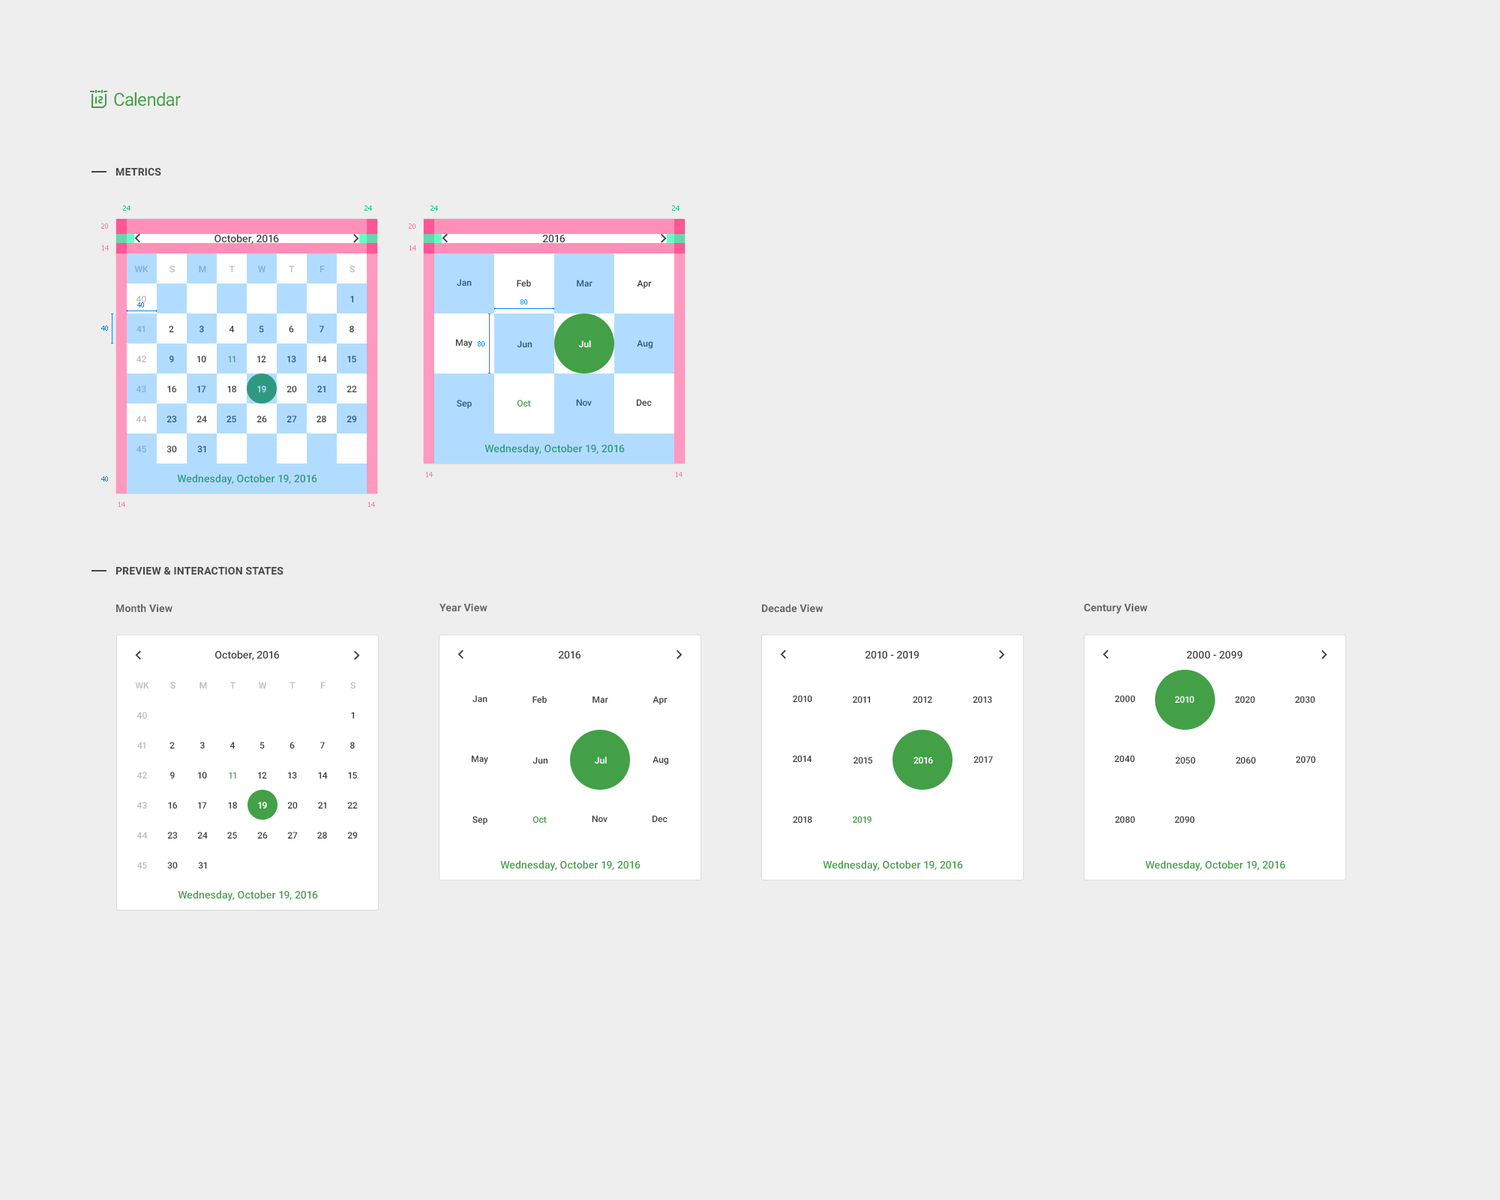
<style>
.page{position:relative;width:1500px;height:1200px;background:#eeeeee}
.page>*{position:absolute;margin:0}
.t1{font:18px "Roboto-Regular";letter-spacing:-0.025em;color:#43a047}
.t2{font:10.5px "Roboto-Bold";letter-spacing:0.01em;color:#454545;text-transform:uppercase}
.t3{font:6.8px "Tahoma";color:#01cf82}
.t4{font:6.8px "Tahoma";color:#ff7cae}
.t5{font:10.5px "Roboto-Medium";color:#404040}
.t6{font:9px "Roboto-Medium";color:#83acd0}
.t7{font:9px "Roboto-Medium";letter-spacing:0.01em;color:#bbbbbb}
.t8{font:9px "Roboto-Medium";letter-spacing:0.01em;color:#83acd0}
.t9{font:9px "Roboto-Medium";letter-spacing:0.01em}
.t10{font:9px "Roboto-Medium";color:#2d567a}
.t11{font:9px "Roboto-Medium";color:#404040}
.t12{font:9px/30px "Roboto-Medium"}
.t13{font:6.8px "Tahoma";color:#008aff}
.t14{font:9px "Roboto-Medium";color:#ffffff}
.t15{font:9px "Roboto-Medium";color:#47a396}
.t16{font:9px "Roboto-Medium";color:#b2dcff}
.t17{font:9px "Roboto-Medium";color:#43a047}
.t18{font:9px "Roboto-Medium";color:#2d577a}
.t19{font:10.5px "Roboto-Medium";letter-spacing:0.01em;color:#2f997f}
.t20{font:10.5px "Roboto-Bold";letter-spacing:0.01em;color:#656565}
.t21{font:9px "Roboto-Medium";color:#bbbbbb}
.t22{font:9px/30px "Roboto-Medium";color:#bbbbbb}
.t23{font:9px "Roboto-Medium";color:#66ae69}
.t24{font:9px "Roboto-Medium";color:#414141}
.t25{font:10.5px "Roboto-Medium";letter-spacing:0.01em;color:#43a047}
</style>
<div class="page">
<p class="t1" style="left:114px;top:92px;width:67px;height:14px">Calendar</p>
<p class="t2" style="left:116px;top:167px;width:45px;height:9px">Metrics</p>
<p class="t3" style="left:123px;top:206px;width:7px;height:5px">24</p>
<p class="t3" style="left:364px;top:206px;width:8px;height:5px">24</p>
<p class="t3" style="left:430px;top:206px;width:8px;height:5px">24</p>
<p class="t3" style="left:672px;top:206px;width:8px;height:5px">24</p>
<p class="t4" style="left:101px;top:224px;width:7px;height:5px">20</p>
<p class="t4" style="left:409px;top:224px;width:7px;height:5px">20</p>
<p class="t4" style="left:102px;top:245px;width:7px;height:5px">14</p>
<p class="t5" style="left:214px;top:234px;width:65px;height:10px">October, 2016</p>
<p class="t4" style="left:410px;top:245px;width:6px;height:5px">14</p>
<p class="t5" style="left:542px;top:235px;width:23px;height:8px">2016</p>
<p class="t6" style="left:134px;top:266px;width:14px;height:6px">WK</p>
<p class="t7" style="left:170px;top:266px;width:5px;height:7px">S</p>
<p class="t8" style="left:199px;top:266px;width:7px;height:7px">M</p>
<p class="t7" style="left:230px;top:266px;width:5px;height:7px">T</p>
<p class="t8" style="left:258px;top:266px;width:8px;height:7px">W</p>
<p class="t9" style="left:289px;top:266px;width:6px;height:6px">T</p>
<p class="t8" style="left:320px;top:266px;width:5px;height:7px">F</p>
<p class="t7" style="left:350px;top:266px;width:5px;height:7px">S</p>
<p class="t10" style="left:457px;top:279px;width:15px;height:7px">Jan</p>
<p class="t11" style="left:517px;top:280px;width:14px;height:7px">Feb</p>
<p class="t10" style="left:577px;top:280px;width:15px;height:7px">Mar</p>
<p class="t11" style="left:637px;top:280px;width:15px;height:9px">Apr</p>
<p class="t12" style="left:136px;top:296px;width:11px;height:156px;text-align:center">40<br>41<br>42<br>43<br>44<br>45</p>
<p class="t13" style="left:137px;top:302px;width:7px;height:6px">40</p>
<p class="t10" style="left:350px;top:296px;width:4px;height:7px">1</p>
<p class="t13" style="left:520px;top:299px;width:7px;height:5px">80</p>
<p class="t13" style="left:101px;top:326px;width:7px;height:5px">40</p>
<p class="t11" style="left:169px;top:326px;width:5px;height:7px">2</p>
<p class="t10" style="left:200px;top:326px;width:4px;height:7px">3</p>
<p class="t11" style="left:229px;top:326px;width:6px;height:7px">4</p>
<p class="t10" style="left:259px;top:326px;width:5px;height:7px">5</p>
<p class="t11" style="left:289px;top:326px;width:5px;height:7px">6</p>
<p class="t10" style="left:320px;top:326px;width:4px;height:7px">7</p>
<p class="t11" style="left:350px;top:326px;width:4px;height:7px">8</p>
<p class="t11" style="left:455px;top:339px;width:17px;height:9px">May</p>
<p class="t13" style="left:478px;top:341px;width:6px;height:5px">80</p>
<p class="t10" style="left:517px;top:340px;width:15px;height:8px">Jun</p>
<p class="t14" style="left:579px;top:340px;width:12px;height:8px">Jul</p>
<p class="t10" style="left:637px;top:340px;width:16px;height:9px">Aug</p>
<p class="t10" style="left:169px;top:356px;width:5px;height:6px">9</p>
<p class="t11" style="left:197px;top:356px;width:9px;height:7px">10</p>
<p class="t15" style="left:228px;top:356px;width:8px;height:7px">11</p>
<p class="t11" style="left:257px;top:356px;width:9px;height:7px">12</p>
<p class="t10" style="left:287px;top:356px;width:9px;height:7px">13</p>
<p class="t11" style="left:317px;top:356px;width:10px;height:7px">14</p>
<p class="t10" style="left:347px;top:356px;width:9px;height:7px">15</p>
<p class="t11" style="left:167px;top:386px;width:10px;height:7px">16</p>
<p class="t10" style="left:197px;top:386px;width:9px;height:7px">17</p>
<p class="t11" style="left:227px;top:386px;width:10px;height:7px">18</p>
<p class="t16" style="left:257px;top:386px;width:9px;height:7px">19</p>
<p class="t11" style="left:286px;top:386px;width:11px;height:7px">20</p>
<p class="t10" style="left:317px;top:386px;width:9px;height:7px">21</p>
<p class="t11" style="left:346px;top:386px;width:11px;height:7px">22</p>
<p class="t10" style="left:457px;top:400px;width:15px;height:9px">Sep</p>
<p class="t17" style="left:517px;top:400px;width:14px;height:7px">Oct</p>
<p class="t18" style="left:576px;top:399px;width:16px;height:7px">Nov</p>
<p class="t11" style="left:636px;top:399px;width:16px;height:7px">Dec</p>
<p class="t10" style="left:166px;top:416px;width:11px;height:7px">23</p>
<p class="t11" style="left:196px;top:416px;width:11px;height:7px">24</p>
<p class="t10" style="left:226px;top:416px;width:10px;height:7px">25</p>
<p class="t11" style="left:256px;top:416px;width:11px;height:7px">26</p>
<p class="t10" style="left:286px;top:416px;width:11px;height:7px">27</p>
<p class="t11" style="left:316px;top:416px;width:10px;height:7px">28</p>
<p class="t10" style="left:346px;top:416px;width:11px;height:7px">29</p>
<p class="t11" style="left:166px;top:446px;width:11px;height:7px">30</p>
<p class="t10" style="left:197px;top:446px;width:9px;height:7px">31</p>
<p class="t19" style="left:484px;top:444px;width:141px;height:10px">Wednesday, October 19, 2016</p>
<p class="t4" style="left:426px;top:472px;width:7px;height:5px">14</p>
<p class="t4" style="left:676px;top:472px;width:6px;height:5px">14</p>
<p class="t13" style="left:101px;top:476px;width:7px;height:6px">40</p>
<p class="t19" style="left:177px;top:474px;width:140px;height:10px">Wednesday, October 19, 2016</p>
<p class="t4" style="left:118px;top:502px;width:7px;height:5px">14</p>
<p class="t4" style="left:368px;top:502px;width:7px;height:5px">14</p>
<p class="t2" style="left:116px;top:566px;width:168px;height:9px">PREVIEW &amp; Interaction States</p>
<p class="t20" style="left:116px;top:604px;width:56px;height:9px">Month View</p>
<p class="t20" style="left:440px;top:603px;width:48px;height:9px">Year View</p>
<p class="t20" style="left:762px;top:604px;width:62px;height:9px">Decade View</p>
<p class="t20" style="left:1084px;top:603px;width:64px;height:11px">Century View</p>
<p class="t5" style="left:215px;top:650px;width:64px;height:11px">October, 2016</p>
<p class="t5" style="left:558px;top:651px;width:22px;height:8px">2016</p>
<p class="t5" style="left:865px;top:651px;width:55px;height:8px">2010 - 2019</p>
<p class="t5" style="left:1186px;top:651px;width:57px;height:8px">2000 - 2099</p>
<p class="t21" style="left:135px;top:682px;width:14px;height:6px">WK</p>
<p class="t7" style="left:170px;top:682px;width:6px;height:7px">S</p>
<p class="t7" style="left:200px;top:682px;width:7px;height:7px">M</p>
<p class="t7" style="left:230px;top:682px;width:6px;height:7px">T</p>
<p class="t7" style="left:259px;top:682px;width:7px;height:7px">W</p>
<p class="t9" style="left:290px;top:682px;width:6px;height:6px">T</p>
<p class="t7" style="left:320px;top:682px;width:6px;height:7px">F</p>
<p class="t7" style="left:350px;top:682px;width:6px;height:7px">S</p>
<p class="t11" style="left:472px;top:695px;width:16px;height:8px">Jan</p>
<p class="t11" style="left:532px;top:696px;width:15px;height:8px">Feb</p>
<p class="t11" style="left:592px;top:696px;width:16px;height:8px">Mar</p>
<p class="t11" style="left:652px;top:696px;width:16px;height:9px">Apr</p>
<p class="t11" style="left:793px;top:695px;width:19px;height:8px">2010</p>
<p class="t11" style="left:853px;top:696px;width:18px;height:8px">2011</p>
<p class="t11" style="left:913px;top:696px;width:19px;height:8px">2012</p>
<p class="t11" style="left:973px;top:696px;width:19px;height:8px">2013</p>
<p class="t11" style="left:1114px;top:695px;width:22px;height:8px">2000</p>
<p class="t14" style="left:1174px;top:696px;width:21px;height:8px;opacity:0.87">2010</p>
<p class="t11" style="left:1235px;top:696px;width:21px;height:8px">2020</p>
<p class="t11" style="left:1295px;top:696px;width:21px;height:8px">2030</p>
<p class="t22" style="left:136px;top:712px;width:12px;height:156px;text-align:center">40<br>41<br>42<br>43<br>44<br>45</p>
<p class="t11" style="left:351px;top:712px;width:4px;height:7px">1</p>
<p class="t11" style="left:170px;top:742px;width:5px;height:7px">2</p>
<p class="t11" style="left:200px;top:742px;width:5px;height:7px">3</p>
<p class="t11" style="left:230px;top:742px;width:6px;height:7px">4</p>
<p class="t11" style="left:260px;top:742px;width:5px;height:7px">5</p>
<p class="t11" style="left:290px;top:742px;width:5px;height:7px">6</p>
<p class="t11" style="left:320px;top:742px;width:5px;height:7px">7</p>
<p class="t11" style="left:350px;top:742px;width:5px;height:7px">8</p>
<p class="t11" style="left:471px;top:755px;width:17px;height:9px">May</p>
<p class="t11" style="left:532px;top:757px;width:16px;height:7px">Jun</p>
<p class="t14" style="left:595px;top:756px;width:12px;height:8px">Jul</p>
<p class="t11" style="left:652px;top:756px;width:17px;height:9px">Aug</p>
<p class="t11" style="left:793px;top:755px;width:19px;height:8px">2014</p>
<p class="t11" style="left:854px;top:757px;width:19px;height:7px">2015</p>
<p class="t14" style="left:914px;top:757px;width:19px;height:7px">2016</p>
<p class="t11" style="left:974px;top:756px;width:19px;height:8px">2017</p>
<p class="t11" style="left:1114px;top:755px;width:21px;height:8px">2040</p>
<p class="t11" style="left:1175px;top:757px;width:21px;height:7px">2050</p>
<p class="t11" style="left:1236px;top:757px;width:20px;height:7px">2060</p>
<p class="t11" style="left:1296px;top:756px;width:20px;height:8px">2070</p>
<p class="t11" style="left:170px;top:772px;width:5px;height:6px">9</p>
<p class="t11" style="left:198px;top:772px;width:9px;height:7px">10</p>
<p class="t23" style="left:229px;top:772px;width:7px;height:7px">11</p>
<p class="t11" style="left:258px;top:772px;width:9px;height:7px">12</p>
<p class="t11" style="left:288px;top:772px;width:9px;height:7px">13</p>
<p class="t11" style="left:318px;top:772px;width:10px;height:7px">14</p>
<p class="t11" style="left:348px;top:772px;width:9px;height:7px">15</p>
<p class="t11" style="left:168px;top:802px;width:10px;height:7px">16</p>
<p class="t11" style="left:198px;top:802px;width:9px;height:7px">17</p>
<p class="t11" style="left:228px;top:802px;width:10px;height:7px">18</p>
<p class="t14" style="left:258px;top:802px;width:9px;height:7px">19</p>
<p class="t11" style="left:287px;top:802px;width:11px;height:7px">20</p>
<p class="t11" style="left:318px;top:802px;width:8px;height:7px">21</p>
<p class="t11" style="left:347px;top:802px;width:11px;height:7px">22</p>
<p class="t11" style="left:472px;top:816px;width:16px;height:9px">Sep</p>
<p class="t17" style="left:532px;top:816px;width:15px;height:8px">Oct</p>
<p class="t24" style="left:592px;top:815px;width:16px;height:8px">Nov</p>
<p class="t11" style="left:652px;top:815px;width:16px;height:8px">Dec</p>
<p class="t11" style="left:793px;top:816px;width:19px;height:8px">2018</p>
<p class="t17" style="left:853px;top:816px;width:19px;height:8px">2019</p>
<p class="t11" style="left:1115px;top:816px;width:21px;height:8px">2080</p>
<p class="t11" style="left:1174px;top:816px;width:21px;height:8px">2090</p>
<p class="t11" style="left:167px;top:832px;width:11px;height:7px">23</p>
<p class="t11" style="left:197px;top:832px;width:11px;height:7px">24</p>
<p class="t11" style="left:227px;top:832px;width:10px;height:7px">25</p>
<p class="t11" style="left:257px;top:832px;width:11px;height:7px">26</p>
<p class="t11" style="left:287px;top:832px;width:11px;height:7px">27</p>
<p class="t11" style="left:317px;top:832px;width:10px;height:7px">28</p>
<p class="t11" style="left:347px;top:832px;width:11px;height:7px">29</p>
<p class="t11" style="left:167px;top:862px;width:11px;height:7px">30</p>
<p class="t11" style="left:198px;top:862px;width:9px;height:7px">31</p>
<p class="t25" style="left:500px;top:860px;width:140px;height:11px">Wednesday, October 19, 2016</p>
<p class="t25" style="left:823px;top:860px;width:140px;height:11px">Wednesday, October 19, 2016</p>
<p class="t25" style="left:1145px;top:860px;width:141px;height:11px">Wednesday, October 19, 2016</p>
<p class="t25" style="left:178px;top:890px;width:140px;height:11px">Wednesday, October 19, 2016</p>
</div>
